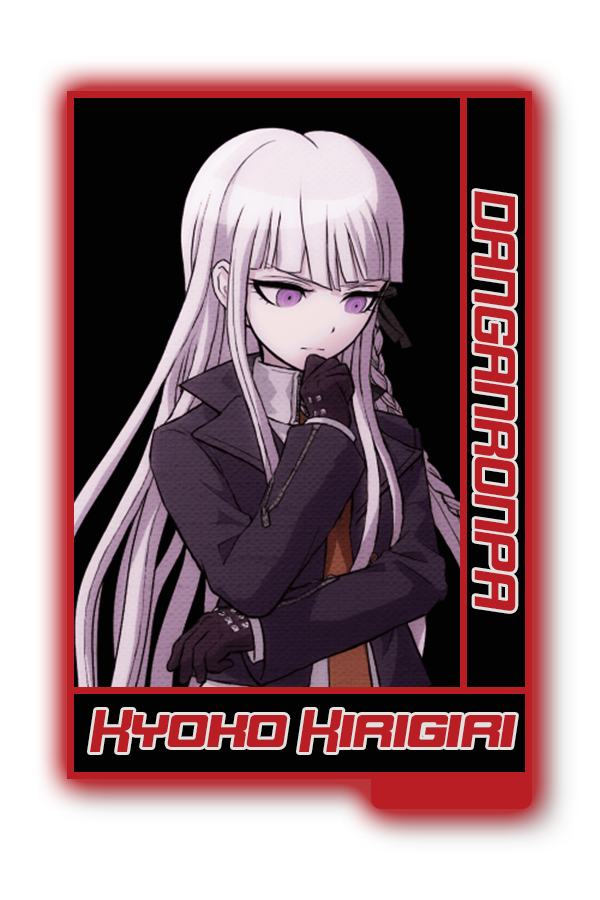
<style>
.page{position:relative;width:600px;height:900px;background:#020202}
.page>*{position:absolute;margin:0}
.t1{font:48.8px "DorBlue";color:#bb2c2e}
.t2{font:50.5px "DorBlue";color:#bb2c2e}
</style>
<div class="page">
<p class="t1" style="left:474px;top:191px;width:42px;height:420px;rotate:90deg">DANGANRONPA</p>
<p class="t2" style="left:90px;top:710px;width:426px;height:42px">Kyoko Kirigiri</p>
</div>
